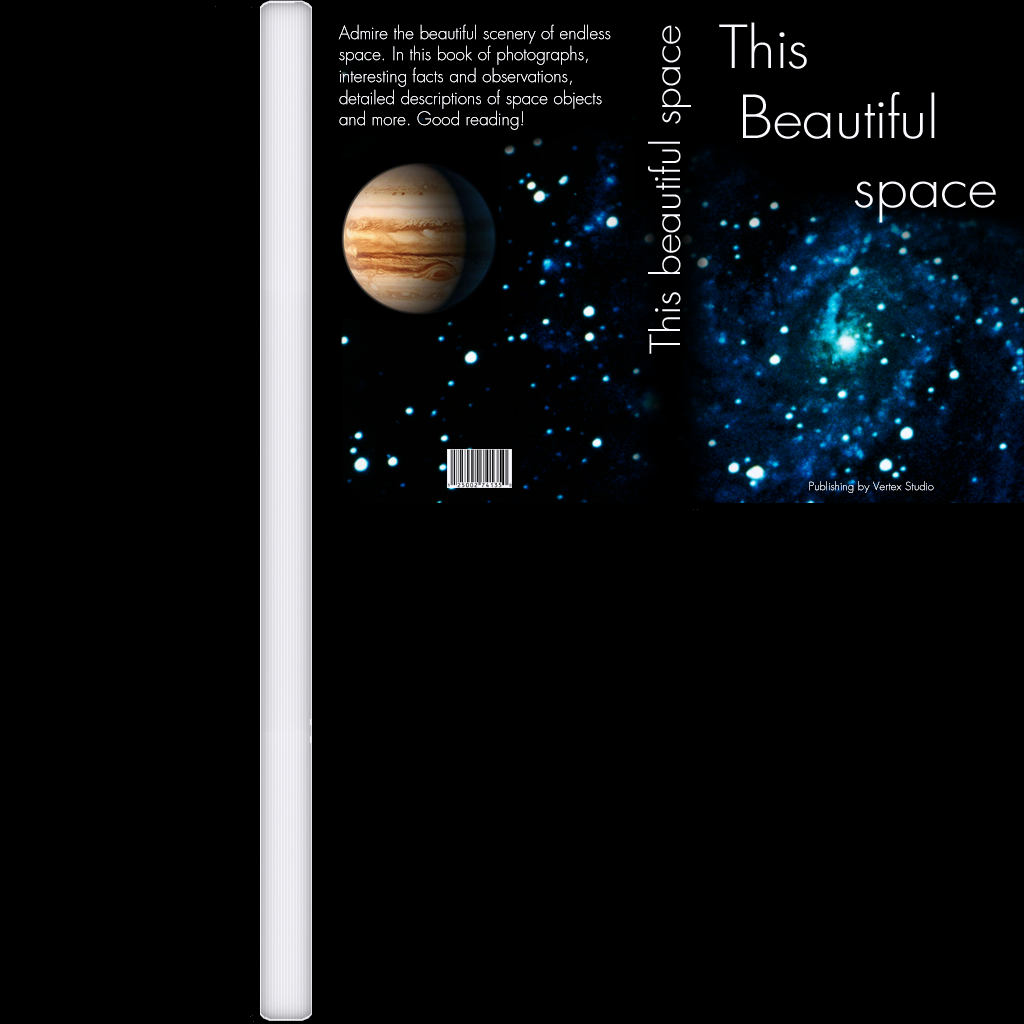
<style>
.page{position:relative;width:1024px;height:1024px;background:#000000}
.page>*{position:absolute;margin:0}
.t1{font:18px "AFuturicaLtThin";color:#ffffff}
.t2{font:40.2px "AFuturicaLtThin";color:#ffffff;scale:1.07 1}
.t3{font:57.7px "AFuturicaLtThin";color:#ffffff;scale:1.07 1}
.t4{font:10.9px "AFuturicaLtThin";color:#ffffff;scale:1.09 1}
</style>
<div class="page">
<p class="t1" style="left:338px;top:24px;width:273px;height:106px">Admire the beautiful scenery of endless <br>space. In this book of photographs, <br>interesting facts and observations, <br>detailed descriptions of space objects <br>and more. Good reading!</p>
<p class="t1" style="left:338px;top:24px;width:273px;height:106px">Admire the beautiful scenery of endless <br>space. In this book of photographs, <br>interesting facts and observations, <br>detailed descriptions of space objects <br>and more. Good reading!</p>
<p class="t2" style="left:648px;top:25px;width:43px;height:329px;rotate:-90deg">This beautiful space</p>
<p class="t3" style="left:719px;top:22px;width:277px;height:201px">This<br> Beautiful <br>       space</p>
<p class="t4" style="left:809px;top:481px;width:125px;height:12px">Publishing by Vertex Studio</p>
<p class="t4" style="left:809px;top:481px;width:125px;height:12px">Publishing by Vertex Studio</p>
</div>
